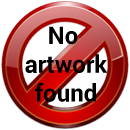
<style>
.page{position:relative;width:130px;height:130px;background:#ffffff}
.page>*{position:absolute;margin:0}
.t1{font:24px "Roboto-Bold";color:#000000}
</style>
<div class="page">
<p class="t1" style="left:25px;top:26px;width:83px;height:76px;text-align:center">No <br>artwork<br>found</p>
</div>
